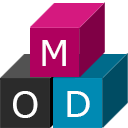
<style>
.page{position:relative;width:128px;height:128px;background:#ffffff}
.page>*{position:absolute;margin:0}
.t1{font:36px "Verdana";letter-spacing:0.075em;color:#ffffff}
</style>
<div class="page">
<p class="t1" style="left:42px;top:40px;width:24px;height:26px">M</p>
<p class="t1" style="left:13px;top:91px;width:25px;height:27px">O</p>
<p class="t1" style="left:67px;top:91px;width:23px;height:26px">D</p>
</div>
